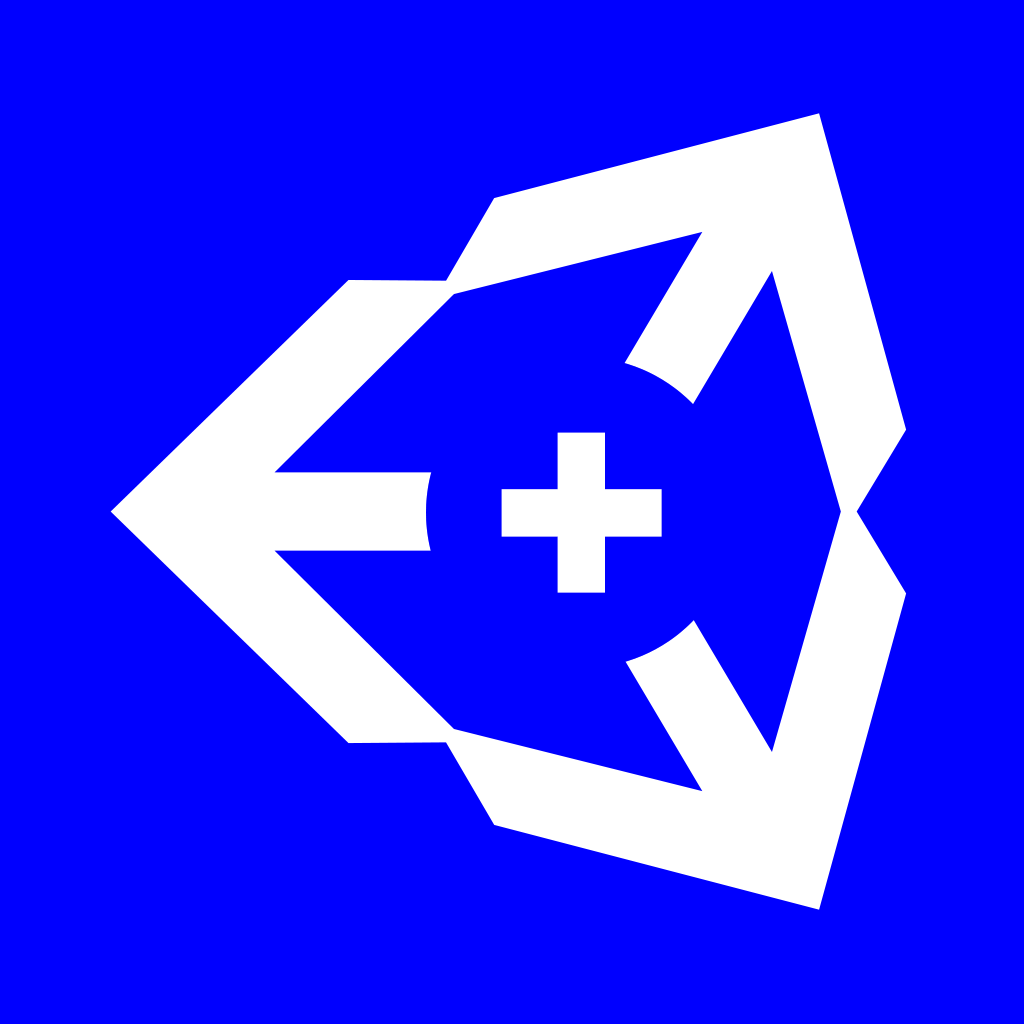
<style>
.page{position:relative;width:1024px;height:1024px;background:#0000ff}
.page>*{position:absolute;margin:0}
.t1{font:300px "Arial-Black";color:#ffffff}
</style>
<div class="page">
<p class="t1" style="left:501px;top:432px;width:161px;height:161px">+</p>
</div>
